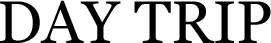
<style>
.page{position:relative;width:271px;height:43px;background:#ffffff}
.page>*{position:absolute;margin:0}
.t1{font:60px "Georgia";color:#000000}
</style>
<div class="page">
<p class="t1" style="left:0px;top:0px;width:271px;height:43px">DAY TRIP</p>
</div>
